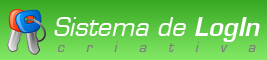
<style>
.page{position:relative;width:267px;height:60px}
.page>*{position:absolute;margin:0}
.t1{font:25px "EurostileLT-Oblique";color:#fefefe}
.t2{font:25px "EurostileLT-DemiOblique";color:#ffffff}
.t3{font:12.5px "EurostileLT-Oblique";letter-spacing:1.78em;color:#7d7d7d}
</style>
<div class="page">
<p class="t1" style="left:54px;top:17px;width:206px;height:25px">Sistema de <span class="t2">LogIn</span></p>
<p class="t3" style="left:58px;top:42px;width:198px;height:10px">criativa</p>
</div>
